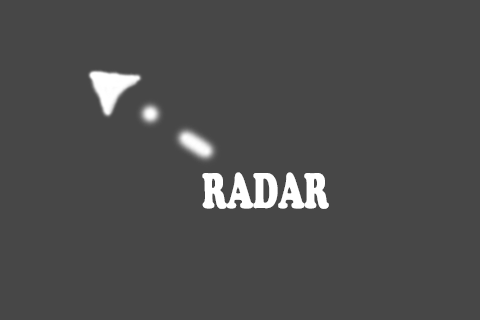
<style>
.page{position:relative;width:480px;height:320px;background:#474747}
.page>*{position:absolute;margin:0}
.t1{font:49px "CooperBlackStd";color:#ffffff;scale:0.61 1}
</style>
<div class="page">
<p class="t1" style="left:202px;top:172px;width:127px;height:37px">RADAR</p>
</div>
